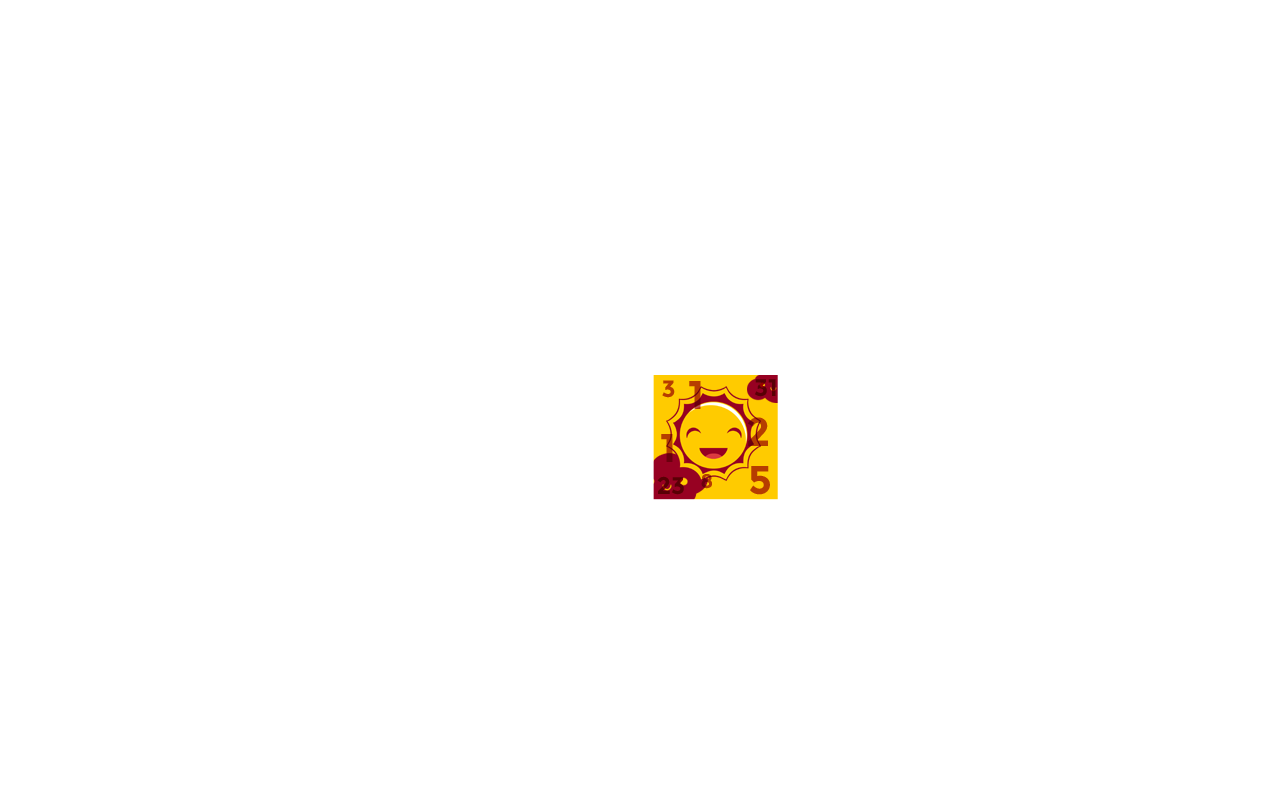
<style>
.page{position:relative;width:1280px;height:800px;background:#ffffff}
.page>*{position:absolute;margin:0}
.t1{font:23.8px "Montserrat-Bold";color:#b63d00}
.t2{font:39.9px "Montserrat-Bold"}
.t3{font:24px "Montserrat-Bold";color:#590005}
.t4{font:39.9px "Montserrat-Bold";color:#b63d00}
.t5{font:19.7px "Montserrat-Bold"}
</style>
<div class="page">
<p class="t1" style="left:662px;top:380px;width:13px;height:18px">3</p>
<p class="t2" style="left:689px;top:381px;width:12px;height:28px">1</p>
<p class="t3" style="left:754px;top:379px;width:22px;height:18px">31</p>
<p class="t4" style="left:747px;top:417px;width:21px;height:29px">2</p>
<p class="t2" style="left:661px;top:434px;width:12px;height:28px">1</p>
<p class="t4" style="left:750px;top:466px;width:20px;height:29px">5</p>
<p class="t3" style="left:657px;top:476px;width:27px;height:19px">23</p>
<p class="t5" style="left:701px;top:474px;width:11px;height:15px">8</p>
</div>
